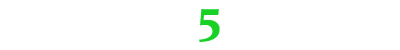
<style>
.page{position:relative;width:400px;height:50px;background:#ffffff}
.page>*{position:absolute;margin:0}
.t1{font:48px "Constantia-Bold";color:#17d224}
</style>
<div class="page">
<p class="t1" style="left:199px;top:9px;width:21px;height:33px">5</p>
</div>
